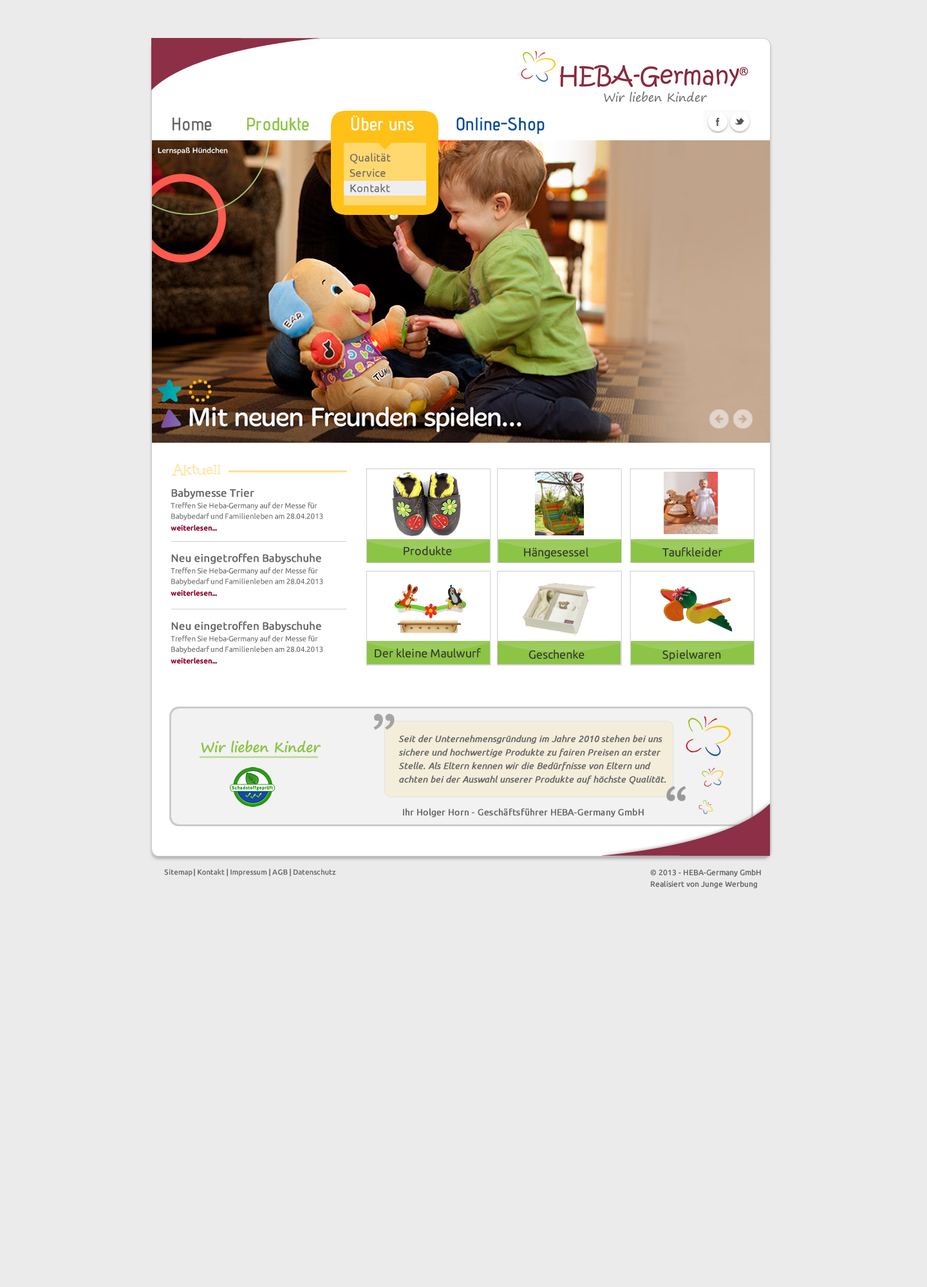
<style>
.page{position:relative;width:927px;height:1287px;background:#ebebeb}
.page>*{position:absolute;margin:0}
.t1{font:11.8px "SegoePrint";color:#666666}
.t2{font:18.1px "AdventPro-SemiBold";color:#666666}
.t3{font:18.1px "AdventPro-SemiBold";color:#8cc445}
.t4{font:18.1px "AdventPro-SemiBold";color:#ffffff}
.t5{font:18.1px "AdventPro-SemiBold";color:#0b4c98}
.t6{font:10.9px/15.3px "Ubuntu";color:#666666}
.t7{font:16.2px "Unkempt-Bold";color:#ffe7aa}
.t8{font:7.4px/11.9px "Ubuntu";color:#666666}
.t9{font:10.6px/12.7px "Ubuntu";color:#666666;font-weight:bold}
.t10{font:7.4px/10.4px "Ubuntu";color:#666666}
.t11{font:7.4px/11.9px "Ubuntu-Bold";color:#8a0026}
.t12{font:11.6px "Ubuntu";color:#333333}
.t13{font:61.8px "EuphemiaCAS";color:#999999;font-weight:bold}
.t14{font:9px/13.5px "Ubuntu-Italic";color:#666666;font-weight:bold}
.t15{font:13.9px "SegoePrint-Bold";color:#8cc445}
.t16{font:58.6px "EuphemiaCAS";color:#999999;font-weight:bold}
.t17{font:9px "Ubuntu";color:#666666;font-weight:bold}
.t18{font:7.4px "Ubuntu-Medium";color:#666666}
.t19{font:7.7px/11.6px "Ubuntu-Medium";color:#666666}
</style>
<div class="page">
<p class="t1" style="left:604px;top:91px;width:103px;height:11px">Wir lieben Kinder</p>
<p class="t2" style="left:172px;top:117px;width:40px;height:14px">Home</p>
<p class="t3" style="left:247px;top:117px;width:62px;height:14px">Produkte</p>
<p class="t4" style="left:351px;top:115px;width:63px;height:16px">Über uns</p>
<p class="t5" style="left:456px;top:117px;width:88px;height:17px">Online-Shop</p>
<p class="t6" style="left:349px;top:153px;width:42px;height:39px">Qualität<br>Service<br>Kontakt</p>
<p class="t7" style="left:171px;top:463px;width:50px;height:13px">Aktuell</p>
<p class="t8" style="left:171px;top:488px;width:152px;height:43px"><span class="t9">Babymesse Trier<br></span>Treffen Sie Heba-Germany auf der Messe für <span class="t10">Babybedarf und Familienleben am 28.04.2013<br></span><span class="t11">weiterlesen...</span></p>
<p class="t12" style="left:403px;top:546px;width:49px;height:9px">Produkte</p>
<p class="t8" style="left:171px;top:553px;width:152px;height:43px"><span class="t9">Neu eingetroffen Babyschuhe<br></span>Treffen Sie Heba-Germany auf der  Messe für <span class="t10">Babybedarf und Familienleben am 28.04.2013<br></span><span class="t11">weiterlesen...</span></p>
<p class="t12" style="left:524px;top:547px;width:64px;height:12px">Hängesessel</p>
<p class="t12" style="left:662px;top:547px;width:60px;height:10px">Taufkleider</p>
<p class="t8" style="left:171px;top:621px;width:152px;height:43px"><span class="t9">Neu eingetroffen Babyschuhe<br></span>Treffen Sie Heba-Germany auf der  Messe für <span class="t10">Babybedarf und Familienleben am 28.04.2013<br></span><span class="t11">weiterlesen...</span></p>
<p class="t12" style="left:374px;top:648px;width:107px;height:10px">Der kleine Maulwurf</p>
<p class="t12" style="left:528px;top:649px;width:56px;height:10px">Geschenke</p>
<p class="t12" style="left:662px;top:649px;width:59px;height:12px">Spielwaren</p>
<p class="t13" style="left:373px;top:714px;width:21px;height:16px;opacity:0.87">”</p>
<p class="t14" style="left:398px;top:735px;width:268px;height:49px">Seit der Unternehmensgründung im Jahre 2010 stehen bei uns sichere und hochwertige Produkte zu fairen Preisen an erster Stelle. Als Eltern kennen wir die Bedürfnisse von Eltern und achten bei der Auswahl unserer Produkte auf höchste Qualität.</p>
<p class="t15" style="left:201px;top:740px;width:119px;height:13px">Wir lieben Kinder</p>
<p class="t16" style="left:666px;top:786px;width:20px;height:15px">“</p>
<p class="t17" style="left:403px;top:808px;width:240px;height:9px">Ihr Holger Horn - Geschäftsführer HEBA-Germany GmbH</p>
<p class="t18" style="left:164px;top:869px;width:172px;height:7px">Sitemap | Kontakt | Impressum | AGB | Datenschutz</p>
<p class="t19" style="left:650px;top:869px;width:111px;height:20px">© 2013 - HEBA-Germany GmbH<br>Realisiert von Junge Werbung</p>
</div>
